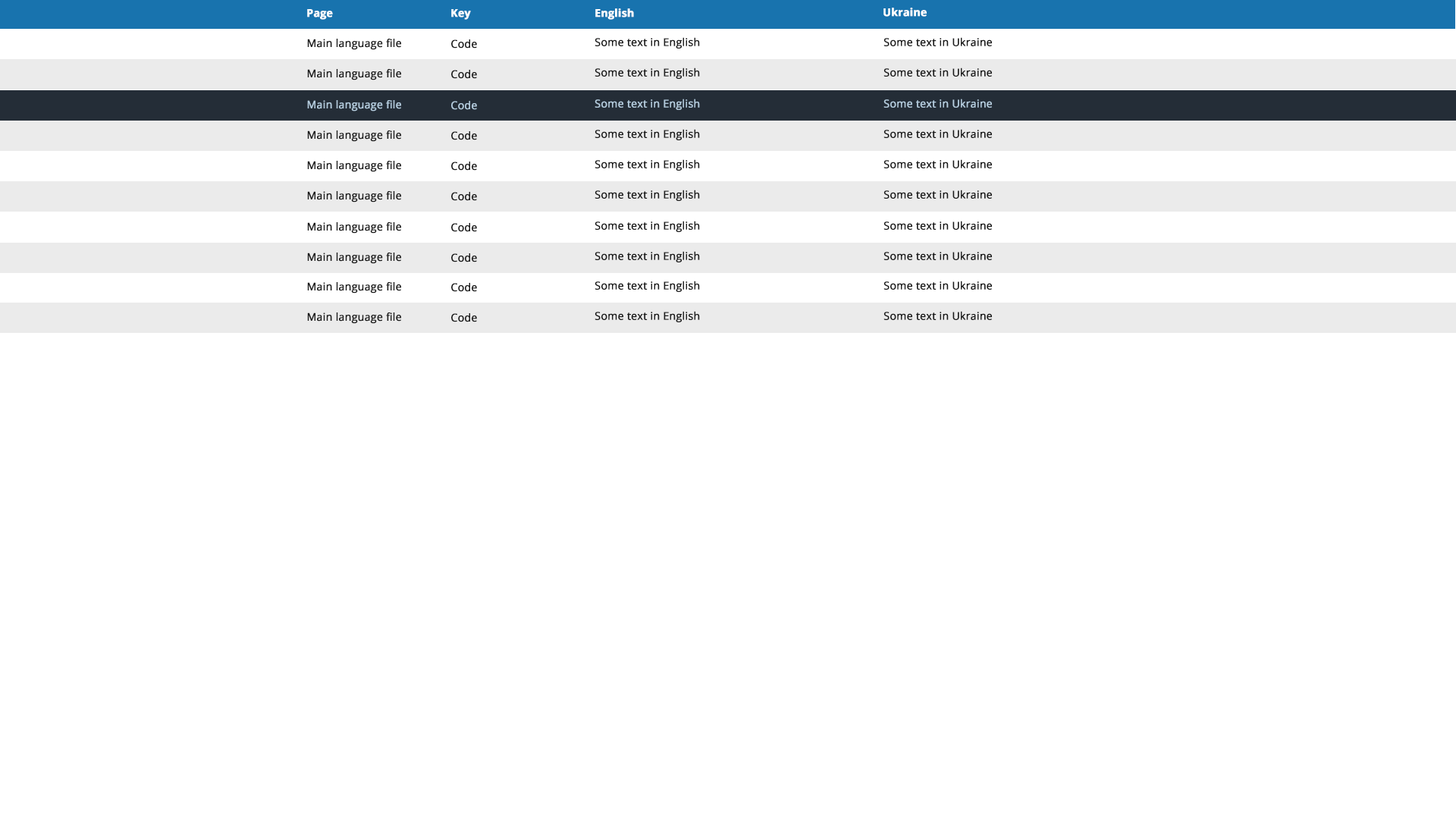
<style>
.page{position:relative;width:1456px;height:819px;background:#ffffff}
.page>*{position:absolute;margin:0}
.t1{font:10.6px "OpenSans-Bold";color:#ffffff;font-weight:bold}
.t2{font:10.6px "OpenSans-Regular";color:#1b1b1b;font-weight:bold}
.t3{font:10.6px "OpenSans-Regular";color:#b3cbdd;font-weight:bold}
</style>
<div class="page">
<p class="t1" style="left:307px;top:9px;width:26px;height:11px">Page</p>
<p class="t1" style="left:451px;top:9px;width:20px;height:11px">Key</p>
<p class="t1" style="left:595px;top:8px;width:39px;height:12px">English</p>
<p class="t1" style="left:883px;top:8px;width:44px;height:9px">Ukraine</p>
<p class="t2" style="left:307px;top:39px;width:94px;height:11px">Main language file</p>
<p class="t2" style="left:451px;top:39px;width:26px;height:10px">Code</p>
<p class="t2" style="left:595px;top:37px;width:105px;height:12px">Some text in English</p>
<p class="t2" style="left:883px;top:37px;width:109px;height:9px">Some text in Ukraine</p>
<p class="t2" style="left:307px;top:69px;width:94px;height:11px">Main language file</p>
<p class="t2" style="left:451px;top:70px;width:26px;height:9px">Code</p>
<p class="t2" style="left:595px;top:67px;width:105px;height:12px">Some text in English</p>
<p class="t2" style="left:883px;top:67px;width:109px;height:10px">Some text in Ukraine</p>
<p class="t3" style="left:307px;top:100px;width:94px;height:11px">Main language file</p>
<p class="t3" style="left:307px;top:100px;width:94px;height:11px">Main language file</p>
<p class="t3" style="left:451px;top:101px;width:26px;height:9px">Code</p>
<p class="t3" style="left:451px;top:101px;width:26px;height:9px">Code</p>
<p class="t3" style="left:595px;top:99px;width:105px;height:11px">Some text in English</p>
<p class="t3" style="left:595px;top:99px;width:105px;height:11px">Some text in English</p>
<p class="t3" style="left:883px;top:99px;width:109px;height:9px">Some text in Ukraine</p>
<p class="t3" style="left:883px;top:99px;width:109px;height:9px">Some text in Ukraine</p>
<p class="t2" style="left:307px;top:130px;width:94px;height:12px">Main language file</p>
<p class="t2" style="left:451px;top:131px;width:26px;height:9px">Code</p>
<p class="t2" style="left:595px;top:129px;width:105px;height:11px">Some text in English</p>
<p class="t2" style="left:883px;top:129px;width:109px;height:9px">Some text in Ukraine</p>
<p class="t2" style="left:307px;top:161px;width:94px;height:11px">Main language file</p>
<p class="t2" style="left:451px;top:162px;width:26px;height:9px">Code</p>
<p class="t2" style="left:595px;top:159px;width:105px;height:12px">Some text in English</p>
<p class="t2" style="left:883px;top:159px;width:109px;height:9px">Some text in Ukraine</p>
<p class="t2" style="left:307px;top:191px;width:94px;height:11px">Main language file</p>
<p class="t2" style="left:451px;top:192px;width:26px;height:9px">Code</p>
<p class="t2" style="left:595px;top:190px;width:105px;height:11px">Some text in English</p>
<p class="t2" style="left:883px;top:190px;width:109px;height:9px">Some text in Ukraine</p>
<p class="t2" style="left:595px;top:221px;width:105px;height:11px">Some text in English</p>
<p class="t2" style="left:883px;top:221px;width:109px;height:9px">Some text in Ukraine</p>
<p class="t2" style="left:307px;top:222px;width:94px;height:12px">Main language file</p>
<p class="t2" style="left:451px;top:223px;width:26px;height:9px">Code</p>
<p class="t2" style="left:307px;top:253px;width:94px;height:11px">Main language file</p>
<p class="t2" style="left:451px;top:253px;width:26px;height:9px">Code</p>
<p class="t2" style="left:595px;top:251px;width:105px;height:11px">Some text in English</p>
<p class="t2" style="left:883px;top:251px;width:109px;height:9px">Some text in Ukraine</p>
<p class="t2" style="left:595px;top:281px;width:105px;height:11px">Some text in English</p>
<p class="t2" style="left:883px;top:281px;width:109px;height:9px">Some text in Ukraine</p>
<p class="t2" style="left:307px;top:282px;width:94px;height:11px">Main language file</p>
<p class="t2" style="left:451px;top:283px;width:26px;height:9px">Code</p>
<p class="t2" style="left:307px;top:312px;width:94px;height:12px">Main language file</p>
<p class="t2" style="left:451px;top:313px;width:26px;height:9px">Code</p>
<p class="t2" style="left:595px;top:311px;width:105px;height:11px">Some text in English</p>
<p class="t2" style="left:883px;top:311px;width:109px;height:9px">Some text in Ukraine</p>
</div>
